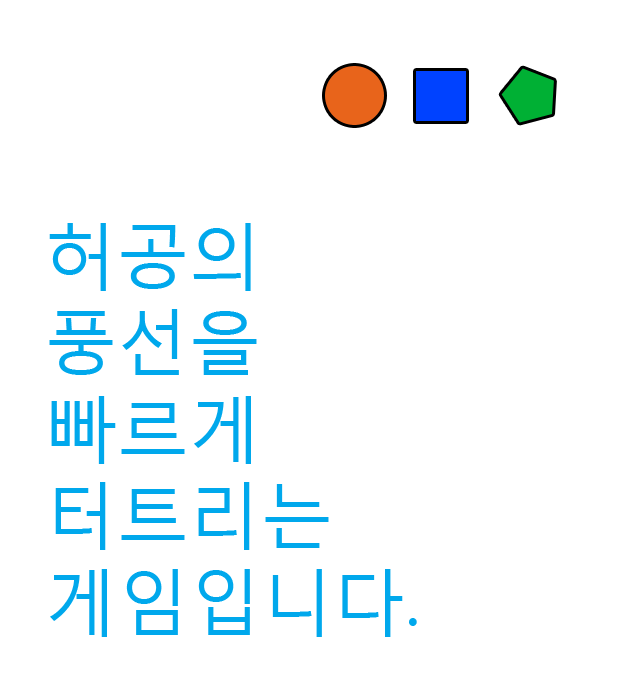
<style>
.page{position:relative;width:620px;height:690px;background:#ffffff}
.page>*{position:absolute;margin:0}
.t1{font:72px "MalgunGothicRegular";color:#00a8ec}
</style>
<div class="page">
<p class="t1" style="left:49px;top:223px;width:368px;height:414px">허공의<br>풍선을<br>빠르게<br>터트리는<br>게임입니다.</p>
</div>
